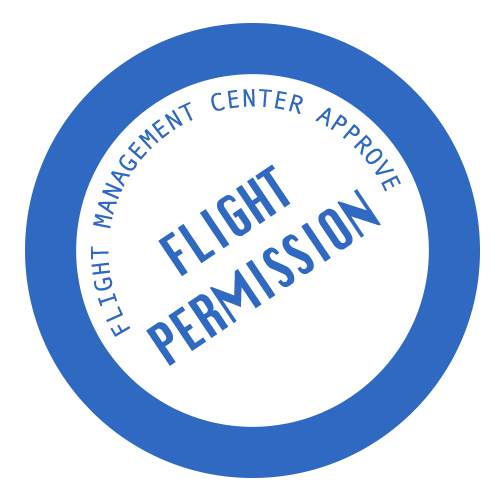
<style>
.page{position:relative;width:500px;height:500px;background:#ffffff}
.page>*{position:absolute;margin:0}
.t1{font:25px "AndaleMono";color:#2f69c2;text-transform:uppercase}
.t2{font:56.4px "Krungthep";color:#2f69c2;text-transform:uppercase;scale:0.71 1}
</style>
<div class="page">
<p class="t1" style="left:91px;top:89px;width:310px;height:248px;rotate:-96deg">Flight management center approve</p>
<p class="t2" style="left:146px;top:164px;width:235px;height:202px;text-align:center;rotate:-34deg">Flight<br>Permission</p>
</div>
